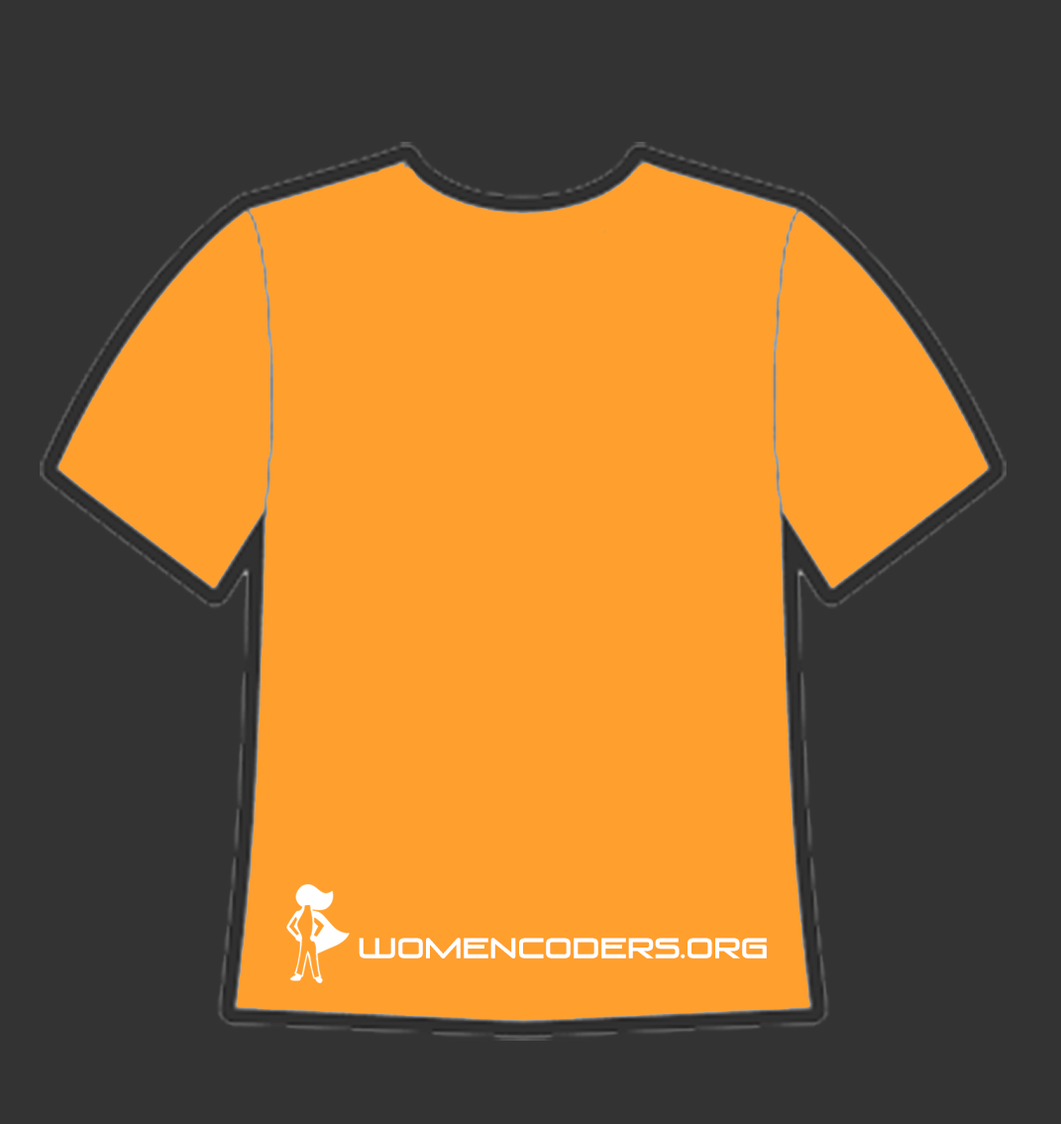
<style>
.page{position:relative;width:1061px;height:1124px;background:#333333}
.page>*{position:absolute;margin:0}
.t1{font:27.1px "VenusRising-Regular";color:#ffffff}
</style>
<div class="page">
<p class="t1" style="left:359px;top:937px;width:408px;height:21px">womencoders.org</p>
</div>
